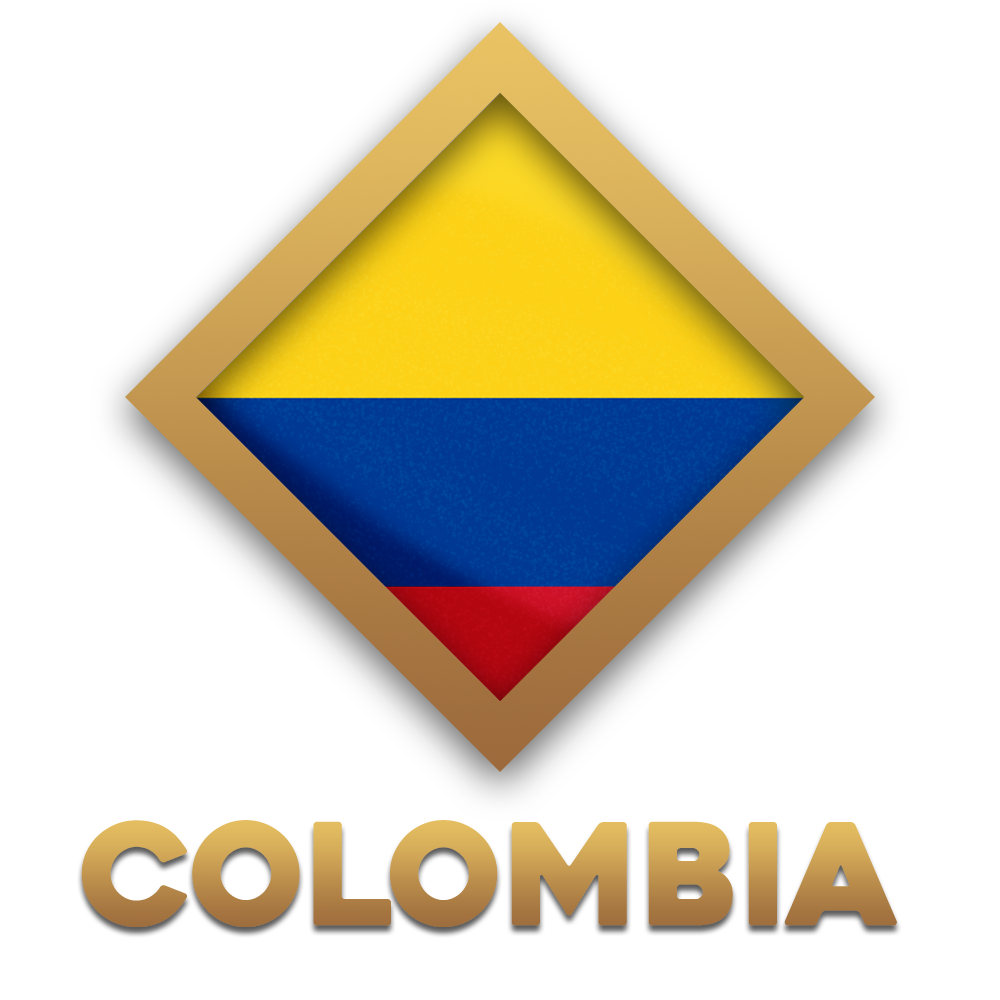
<style>
.page{position:relative;width:1000px;height:1000px;background:#ffffff}
.page>*{position:absolute;margin:0}
.t1{font:141px "Heavitas"}
</style>
<div class="page">
<p class="t1" style="left:81px;top:820px;width:816px;height:107px">colombia</p>
</div>
